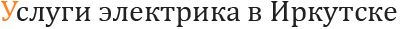
<style>
.page{position:relative;width:402px;height:29px;background:#ffffff}
.page>*{position:absolute;margin:0}
.t1{font:30px "Cambria";color:#212121}
.t2{font:30px "Cambria";color:#ff8120}
</style>
<div class="page">
<p class="t1" style="left:1px;top:1px;width:396px;height:26px"><span class="t2">У</span>слуги электрика в Иркутске</p>
</div>
